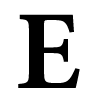
<style>
.page{position:relative;width:100px;height:100px;background:#ffffff}
.page>*{position:absolute;margin:0}
.t1{font:112.5px "MinionPro-Bold";color:#000000}
</style>
<div class="page">
<p class="t1" style="left:18px;top:14px;width:62px;height:74px">E</p>
</div>
